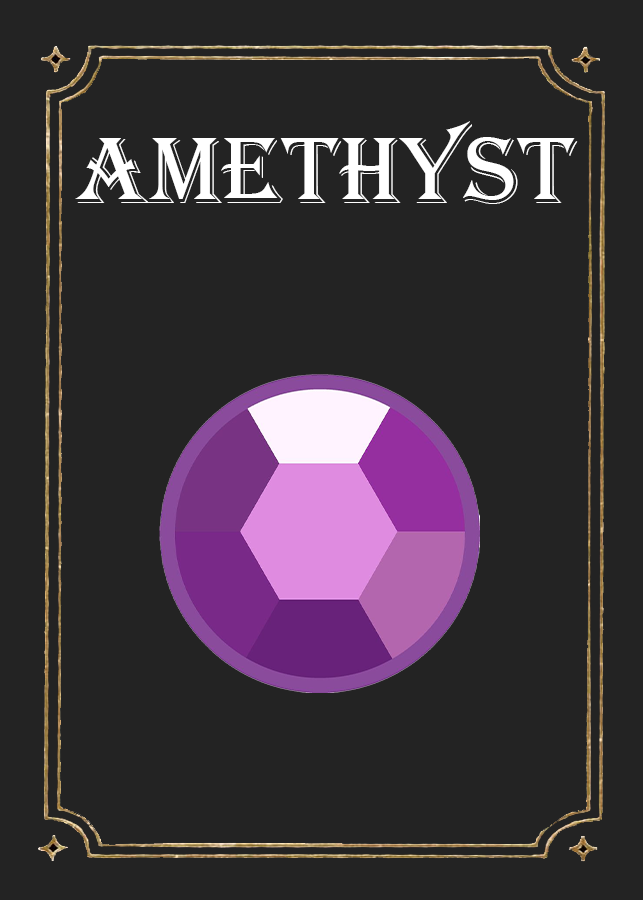
<style>
.page{position:relative;width:643px;height:900px;background:#232323}
.page>*{position:absolute;margin:0}
.t1{font:98.3px "Algerian";color:#ffffff}
</style>
<div class="page">
<p class="t1" style="left:75px;top:121px;width:503px;height:83px">Amethyst</p>
</div>
